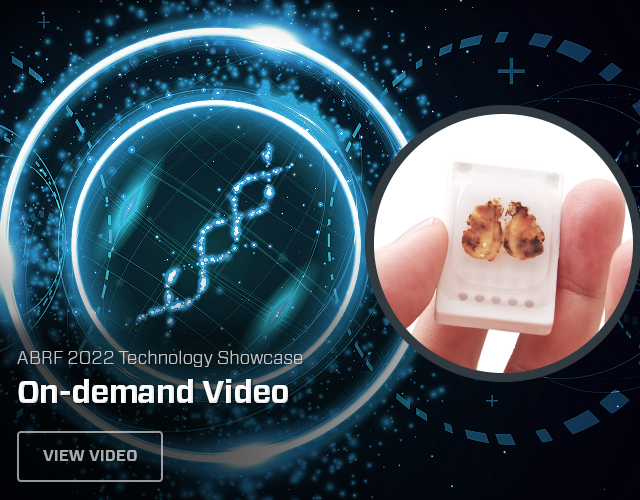
<style>
.page{position:relative;width:640px;height:500px}
.page>*{position:absolute;margin:0}
.t1{font:18px "Forza-Light";color:#c2c4c5}
.t2{font:32px "Forza-Bold";letter-spacing:-0.015em;color:#ffffff}
.t3{font:16px "Forza-Bold";letter-spacing:-0.01em;color:#a7a8a9;text-transform:uppercase}
</style>
<div class="page">
<p class="t1" style="left:17px;top:350px;width:286px;height:17px">ABRF 2022 Technology Showcase</p>
<p class="t2" style="left:18px;top:379px;width:270px;height:24px">On-demand Video</p>
<p class="t3" style="left:43px;top:450px;width:94px;height:11px">VIEW VIDEO</p>
</div>
